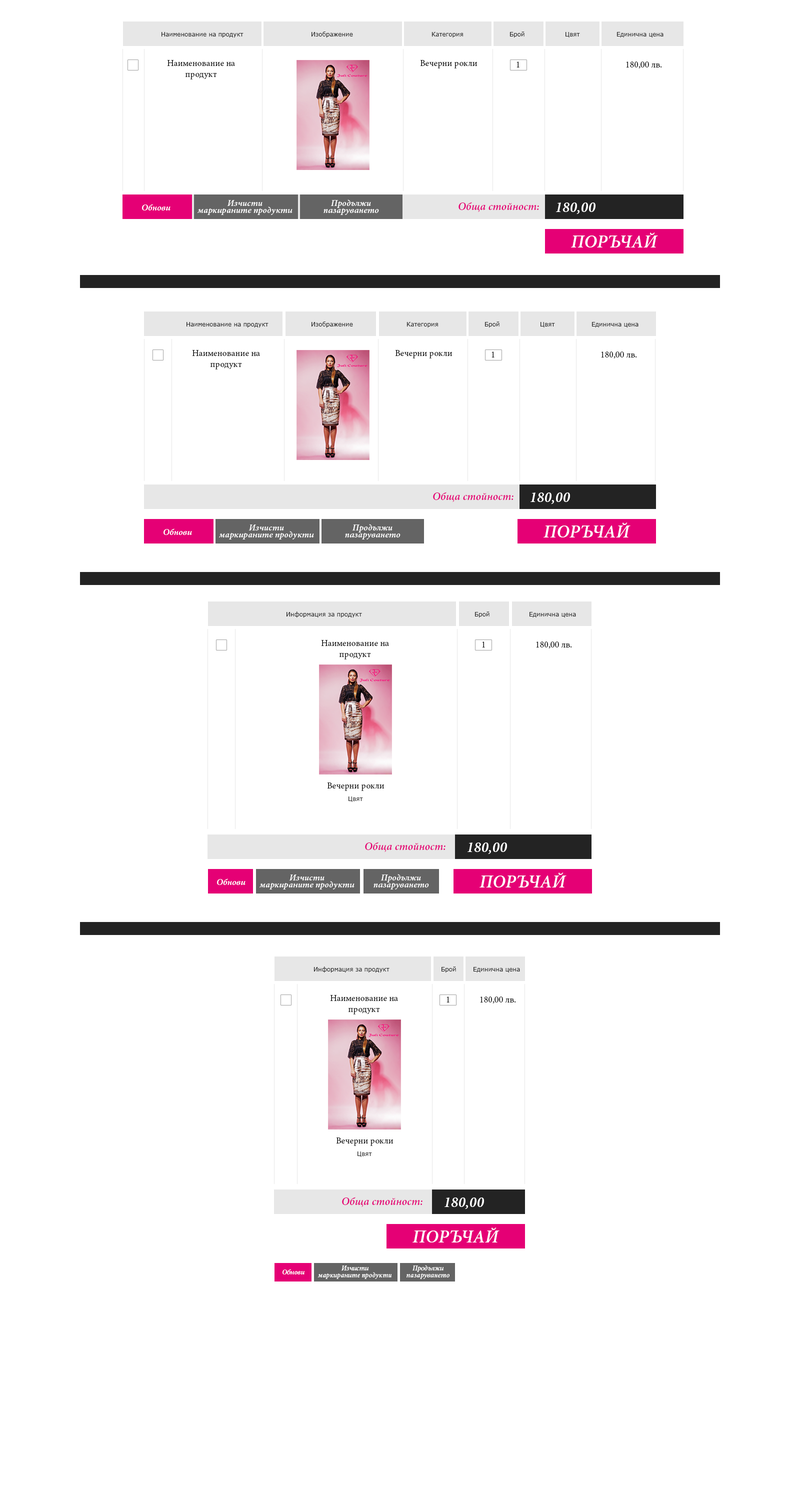
<style>
.page{position:relative;width:800px;height:1500px;background:#ffffff}
.page>*{position:absolute;margin:0}
.t1{font:6px "Verdana";color:#282828}
.t2{font:9px/11px "MinionPro-Regular";color:#161616}
.t3{font:9px "MinionPro-Regular";color:#161616}
.t4{font:9px "MinionPro-SemiboldIt";color:#ffffff}
.t5{font:9px/7px "MinionPro-SemiboldIt";color:#ffffff}
.t6{font:11px "MinionPro-SemiboldIt";color:#e50075}
.t7{font:15px "MinionPro-SemiboldIt";color:#ffffff}
.t8{font:18px "MinionPro-SemiboldIt";color:#ffffff;text-transform:uppercase}
.t9{font:7px/7px "MinionPro-SemiboldIt";color:#ffffff}
.t10{font:7px "MinionPro-SemiboldIt";color:#ffffff}
</style>
<div class="page">
<p class="t1" style="left:162px;top:32px;width:82px;height:6px">Наименование на продукт</p>
<p class="t1" style="left:312px;top:32px;width:41px;height:6px">Изображение</p>
<p class="t1" style="left:432px;top:32px;width:31px;height:6px">Категория</p>
<p class="t1" style="left:510px;top:32px;width:14px;height:6px">Брой</p>
<p class="t1" style="left:566px;top:32px;width:14px;height:6px">Цвят</p>
<p class="t1" style="left:617px;top:32px;width:47px;height:6px">Единична цена</p>
<p class="t2" style="left:167px;top:60px;width:68px;height:20px;text-align:center">Наименование на<br>продукт</p>
<p class="t3" style="left:420px;top:60px;width:58px;height:8px">Вечерни рокли</p>
<p class="t3" style="left:516px;top:62px;width:4px;height:6px">1</p>
<p class="t3" style="left:626px;top:62px;width:36px;height:6px">180,00 лв.</p>
<p class="t4" style="left:142px;top:204px;width:28px;height:6px">Обнови</p>
<p class="t5" style="left:198px;top:200px;width:94px;height:15px;text-align:center">Изчисти<br>маркираните продукти</p>
<p class="t5" style="left:324px;top:200px;width:55px;height:15px;text-align:center">Продължи<br>пазаруването</p>
<p class="t6" style="left:458px;top:202px;width:81px;height:10px">Обща стойност:</p>
<p class="t7" style="left:556px;top:202px;width:40px;height:12px">180,00</p>
<p class="t8" style="left:571px;top:232px;width:87px;height:16px">Поръчай</p>
<p class="t1" style="left:186px;top:322px;width:82px;height:6px">Наименование на продукт</p>
<p class="t1" style="left:312px;top:322px;width:41px;height:6px">Изображение</p>
<p class="t1" style="left:407px;top:322px;width:31px;height:6px">Категория</p>
<p class="t1" style="left:485px;top:322px;width:15px;height:6px">Брой</p>
<p class="t1" style="left:540px;top:322px;width:15px;height:6px">Цвят</p>
<p class="t1" style="left:592px;top:322px;width:46px;height:6px">Единична цена</p>
<p class="t2" style="left:192px;top:350px;width:68px;height:20px;text-align:center">Наименование на<br>продукт</p>
<p class="t3" style="left:395px;top:350px;width:57px;height:8px">Вечерни рокли</p>
<p class="t3" style="left:492px;top:352px;width:2px;height:6px">1</p>
<p class="t3" style="left:601px;top:352px;width:36px;height:6px">180,00 лв.</p>
<p class="t6" style="left:433px;top:492px;width:81px;height:10px">Обща стойност:</p>
<p class="t7" style="left:530px;top:492px;width:40px;height:12px">180,00</p>
<p class="t4" style="left:164px;top:528px;width:28px;height:7px">Обнови</p>
<p class="t5" style="left:219px;top:524px;width:95px;height:16px;text-align:center">Изчисти<br>маркираните продукти</p>
<p class="t5" style="left:345px;top:524px;width:55px;height:16px;text-align:center">Продължи<br>пазаруването</p>
<p class="t8" style="left:544px;top:522px;width:86px;height:16px">Поръчай</p>
<p class="t1" style="left:286px;top:612px;width:76px;height:6px">Информация за продукт</p>
<p class="t1" style="left:475px;top:612px;width:15px;height:6px">Брой</p>
<p class="t1" style="left:530px;top:612px;width:46px;height:6px">Единична цена</p>
<p class="t2" style="left:321px;top:640px;width:68px;height:20px;text-align:center">Наименование на<br>продукт</p>
<p class="t3" style="left:482px;top:642px;width:3px;height:6px">1</p>
<p class="t3" style="left:536px;top:642px;width:36px;height:6px">180,00 лв.</p>
<p class="t3" style="left:327px;top:782px;width:57px;height:9px">Вечерни рокли</p>
<p class="t1" style="left:348px;top:796px;width:15px;height:6px">Цвят</p>
<p class="t6" style="left:365px;top:842px;width:81px;height:10px">Обща стойност:</p>
<p class="t7" style="left:468px;top:842px;width:39px;height:12px">180,00</p>
<p class="t4" style="left:217px;top:878px;width:29px;height:7px">Обнови</p>
<p class="t5" style="left:260px;top:874px;width:94px;height:16px;text-align:center">Изчисти<br>маркираните продукти</p>
<p class="t5" style="left:374px;top:874px;width:55px;height:16px;text-align:center">Продължи<br>пазаруването</p>
<p class="t8" style="left:480px;top:872px;width:86px;height:16px">Поръчай</p>
<p class="t1" style="left:314px;top:966px;width:76px;height:6px">Информация за продукт</p>
<p class="t1" style="left:442px;top:966px;width:14px;height:6px">Брой</p>
<p class="t1" style="left:474px;top:967px;width:46px;height:5px">Единична цена</p>
<p class="t2" style="left:330px;top:995px;width:68px;height:19px;text-align:center">Наименование на<br>продукт</p>
<p class="t3" style="left:446px;top:996px;width:4px;height:6px">1</p>
<p class="t3" style="left:480px;top:996px;width:36px;height:8px">180,00 лв.</p>
<p class="t3" style="left:336px;top:1138px;width:58px;height:8px">Вечерни рокли</p>
<p class="t1" style="left:358px;top:1152px;width:14px;height:5px">Цвят</p>
<p class="t6" style="left:342px;top:1197px;width:80px;height:10px">Обща стойност:</p>
<p class="t7" style="left:444px;top:1198px;width:40px;height:11px">180,00</p>
<p class="t8" style="left:412px;top:1228px;width:88px;height:14px">Поръчай</p>
<p class="t9" style="left:318px;top:1266px;width:74px;height:13px;text-align:center">Изчисти<br>маркираните продукти</p>
<p class="t9" style="left:406px;top:1265px;width:44px;height:14px;text-align:center">Продължи<br>пазаруването</p>
<p class="t10" style="left:282px;top:1269px;width:22px;height:5px">Обнови</p>
</div>
